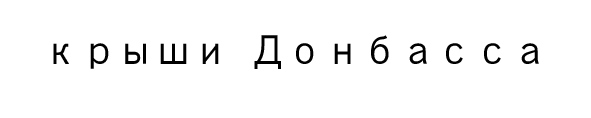
<style>
.page{position:relative;width:591px;height:118px;background:#ffffff}
.page>*{position:absolute;margin:0}
.t1{font:37.5px "MS-Gothic";color:#000000}
</style>
<div class="page">
<p class="t1" style="left:53px;top:35px;width:486px;height:34px">крыши Донбасса</p>
</div>
